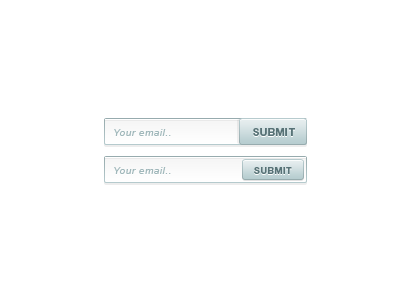
<style>
.page{position:relative;width:400px;height:300px;background:#ffffff}
.page>*{position:absolute;margin:0}
.t1{font:10px "Arial-ItalicMT";letter-spacing:0.05em;color:#a1b8bb}
.t2{font:10px "HelveticaNeueLTStd-Bd";letter-spacing:0.05em;color:#577276;text-transform:uppercase}
.t3{font:9px "HelveticaNeueLTStd-Bd";letter-spacing:0.05em;color:#577276;text-transform:uppercase}
</style>
<div class="page">
<p class="t1" style="left:114px;top:129px;width:57px;height:7px">Your email..</p>
<p class="t2" style="left:253px;top:128px;width:42px;height:8px">submit</p>
<p class="t1" style="left:114px;top:167px;width:57px;height:7px">Your email..</p>
<p class="t3" style="left:254px;top:167px;width:38px;height:7px">submit</p>
</div>
